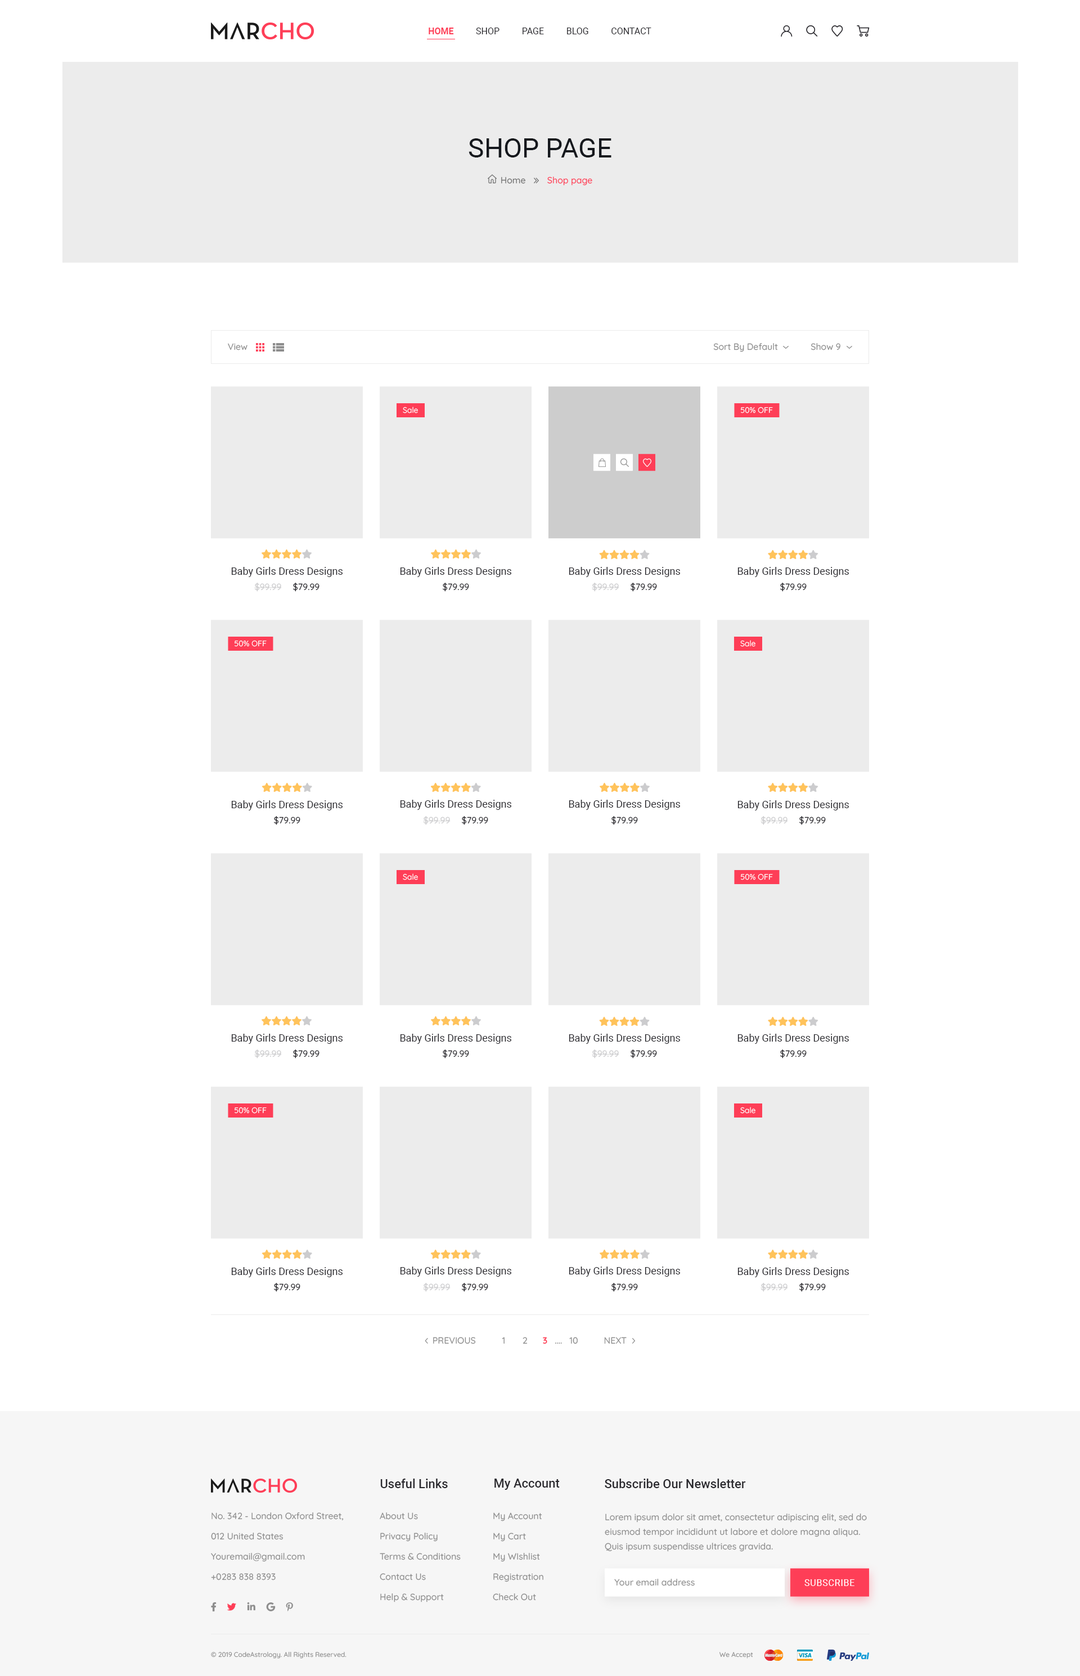
<style>
.page{position:relative;width:1080px;height:1676px;background:#ffffff}
.page>*{position:absolute;margin:0}
.t1{font:9px "Roboto-Regular";color:#29282d}
.t2{font:9px "Roboto-Bold";color:#fe3e57}
.t3{font:27px "Roboto-Regular";color:#15181d}
.t4{font:9px "Quicksand-Medium";color:#727272}
.t5{font:9px "Quicksand-Medium";color:#fe3e57}
.t6{font:9px "Quicksand-Medium";color:#8d8d8d}
.t7{font:7.9px "Quicksand-Regular";color:#ffffff}
.t8{font:10.1px "Roboto-Regular";color:#29282d}
.t9{font:9px "Quicksand-Medium";color:#ccccce}
.t10{font:9px "Quicksand-Medium";color:#29282d}
.t11{font:9px "Quicksand-Bold";color:#fe3e57}
.t12{font:12.4px "Roboto-Medium";color:#29282d}
.t13{font:9px/20.2px "Quicksand-Medium";color:#8d8d8d}
.t14{font:9px/14.6px "Quicksand-Medium";color:#8d8d8d}
.t15{font:9px "Roboto-Regular";letter-spacing:0.05em;color:#ffffff;text-transform:uppercase}
.t16{font:6.8px "Quicksand-Medium";color:#8d8d8d}
</style>
<div class="page">
<p class="t1" style="left:429px;top:28px;width:222px;height:6px"><span class="t2">HOME          </span>SHOP          PAGE          BLOG          CONTACT</p>
<p class="t3" style="left:469px;top:138px;width:142px;height:20px">SHOP PAGE</p>
<p class="t4" style="left:501px;top:177px;width:24px;height:7px">Home</p>
<p class="t5" style="left:547px;top:177px;width:45px;height:9px">Shop page</p>
<p class="t6" style="left:228px;top:343px;width:20px;height:7px">View</p>
<p class="t6" style="left:713px;top:343px;width:65px;height:9px">Sort By Default</p>
<p class="t6" style="left:811px;top:343px;width:29px;height:7px">Show 9</p>
<p class="t7" style="left:403px;top:407px;width:15px;height:6px">Sale</p>
<p class="t7" style="left:741px;top:407px;width:32px;height:6px">50% OFF</p>
<p class="t8" style="left:231px;top:567px;width:112px;height:10px">Baby Girls Dress Designs</p>
<p class="t8" style="left:400px;top:567px;width:111px;height:10px">Baby Girls Dress Designs</p>
<p class="t8" style="left:569px;top:567px;width:111px;height:10px">Baby Girls Dress Designs</p>
<p class="t8" style="left:737px;top:567px;width:112px;height:10px">Baby Girls Dress Designs</p>
<p class="t9" style="left:254px;top:582px;width:28px;height:10px">$99.99</p>
<p class="t10" style="left:293px;top:582px;width:27px;height:10px">$79.99</p>
<p class="t10" style="left:443px;top:582px;width:26px;height:10px">$79.99</p>
<p class="t9" style="left:592px;top:582px;width:27px;height:10px">$99.99</p>
<p class="t10" style="left:631px;top:582px;width:26px;height:10px">$79.99</p>
<p class="t10" style="left:780px;top:582px;width:27px;height:10px">$79.99</p>
<p class="t7" style="left:235px;top:640px;width:32px;height:7px">50% OFF</p>
<p class="t7" style="left:740px;top:640px;width:15px;height:7px">Sale</p>
<p class="t8" style="left:231px;top:800px;width:112px;height:11px">Baby Girls Dress Designs</p>
<p class="t8" style="left:400px;top:800px;width:111px;height:10px">Baby Girls Dress Designs</p>
<p class="t8" style="left:569px;top:800px;width:111px;height:10px">Baby Girls Dress Designs</p>
<p class="t8" style="left:737px;top:800px;width:112px;height:11px">Baby Girls Dress Designs</p>
<p class="t10" style="left:274px;top:816px;width:26px;height:9px">$79.99</p>
<p class="t9" style="left:423px;top:816px;width:28px;height:9px">$99.99</p>
<p class="t10" style="left:462px;top:816px;width:26px;height:9px">$79.99</p>
<p class="t10" style="left:611px;top:816px;width:27px;height:9px">$79.99</p>
<p class="t9" style="left:760px;top:816px;width:28px;height:9px">$99.99</p>
<p class="t10" style="left:799px;top:816px;width:27px;height:9px">$79.99</p>
<p class="t7" style="left:403px;top:874px;width:15px;height:6px">Sale</p>
<p class="t7" style="left:741px;top:874px;width:32px;height:6px">50% OFF</p>
<p class="t8" style="left:231px;top:1034px;width:112px;height:10px">Baby Girls Dress Designs</p>
<p class="t8" style="left:400px;top:1034px;width:111px;height:10px">Baby Girls Dress Designs</p>
<p class="t8" style="left:569px;top:1034px;width:111px;height:10px">Baby Girls Dress Designs</p>
<p class="t8" style="left:737px;top:1034px;width:112px;height:10px">Baby Girls Dress Designs</p>
<p class="t9" style="left:254px;top:1049px;width:28px;height:10px">$99.99</p>
<p class="t10" style="left:293px;top:1049px;width:27px;height:10px">$79.99</p>
<p class="t10" style="left:443px;top:1049px;width:26px;height:10px">$79.99</p>
<p class="t9" style="left:592px;top:1049px;width:27px;height:10px">$99.99</p>
<p class="t10" style="left:631px;top:1049px;width:26px;height:10px">$79.99</p>
<p class="t10" style="left:780px;top:1049px;width:27px;height:10px">$79.99</p>
<p class="t7" style="left:235px;top:1107px;width:32px;height:7px">50% OFF</p>
<p class="t7" style="left:740px;top:1107px;width:15px;height:7px">Sale</p>
<p class="t8" style="left:231px;top:1267px;width:112px;height:10px">Baby Girls Dress Designs</p>
<p class="t8" style="left:400px;top:1267px;width:111px;height:10px">Baby Girls Dress Designs</p>
<p class="t8" style="left:569px;top:1267px;width:111px;height:10px">Baby Girls Dress Designs</p>
<p class="t8" style="left:737px;top:1267px;width:112px;height:10px">Baby Girls Dress Designs</p>
<p class="t10" style="left:274px;top:1282px;width:26px;height:10px">$79.99</p>
<p class="t9" style="left:423px;top:1282px;width:28px;height:10px">$99.99</p>
<p class="t10" style="left:462px;top:1282px;width:26px;height:10px">$79.99</p>
<p class="t10" style="left:611px;top:1282px;width:27px;height:10px">$79.99</p>
<p class="t9" style="left:760px;top:1282px;width:28px;height:10px">$99.99</p>
<p class="t10" style="left:799px;top:1282px;width:27px;height:10px">$79.99</p>
<p class="t6" style="left:433px;top:1337px;width:43px;height:7px">PREVIOUS</p>
<p class="t6" style="left:502px;top:1337px;width:76px;height:7px">1 2 <span class="t11">3</span>   ....   10</p>
<p class="t6" style="left:604px;top:1337px;width:23px;height:7px">NEXT</p>
<p class="t12" style="left:380px;top:1479px;width:68px;height:9px">Useful Links</p>
<p class="t12" style="left:494px;top:1479px;width:66px;height:11px">My Account</p>
<p class="t12" style="left:605px;top:1479px;width:141px;height:9px">Subscribe Our Newsletter</p>
<p class="t13" style="left:211px;top:1513px;width:133px;height:68px">No. 342 - London Oxford Street,<br>012 United States<br>Youremail@gmail.com<br>+0283 838 8393</p>
<p class="t13" style="left:380px;top:1513px;width:81px;height:90px">About Us<br>Privacy Policy<br>Terms &amp; Conditions<br>Contact Us<br>Help &amp; Support</p>
<p class="t13" style="left:493px;top:1513px;width:50px;height:88px">My Account<br>My Cart<br>My WIshlist<br>Registration<br>Check Out</p>
<p class="t14" style="left:605px;top:1514px;width:262px;height:38px">Lorem ipsum dolor sit amet, consectetur adipiscing elit, sed do eiusmod tempor incididunt ut labore et dolore magna aliqua. Quis ipsum suspendisse ultrices gravida.</p>
<p class="t6" style="left:614px;top:1579px;width:81px;height:7px">Your email address</p>
<p class="t15" style="left:804px;top:1580px;width:50px;height:6px">Subscribe</p>
<p class="t16" style="left:211px;top:1652px;width:135px;height:7px">© 2019 CodeAstrology. All Rights Reserved.</p>
<p class="t16" style="left:719px;top:1652px;width:34px;height:7px">We Accept</p>
</div>
